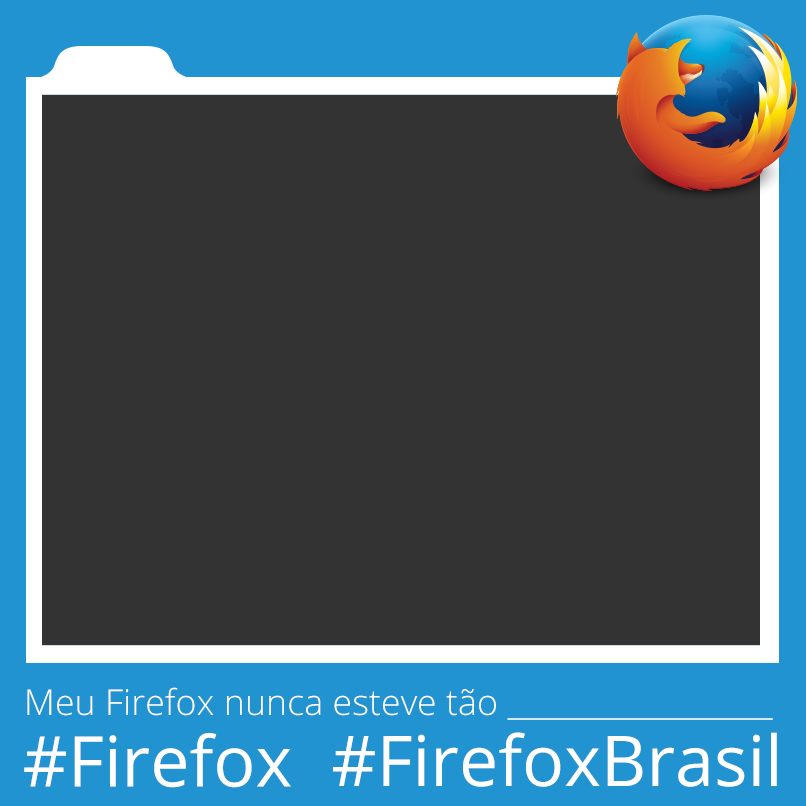
<style>
.page{position:relative;width:806px;height:806px;background:#333333}
.page>*{position:absolute;margin:0}
.t1{font:35.9px "OpenSans-Light";color:#ffffff}
.t2{font:70.1px "OpenSans";color:#ffffff}
</style>
<div class="page">
<p class="t1" style="left:27px;top:687px;width:746px;height:33px">Meu Firefox nunca esteve tão __________________</p>
<p class="t2" style="left:24px;top:733px;width:267px;height:55px">#Firefox</p>
<p class="t2" style="left:333px;top:732px;width:444px;height:55px">#FirefoxBrasil</p>
</div>
